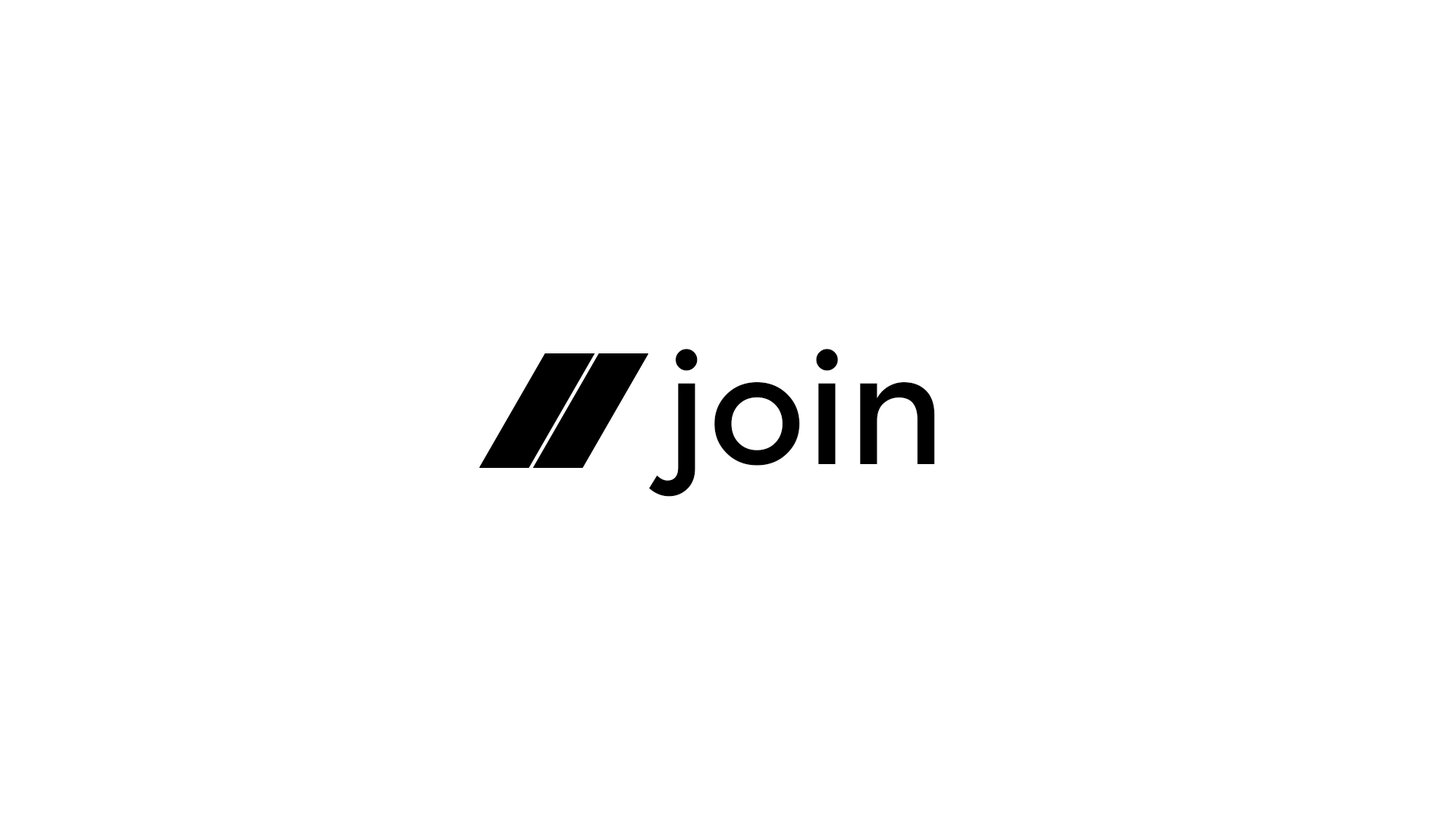
<style>
.page{position:relative;width:1456px;height:819px;background:#ffffff}
.page>*{position:absolute;margin:0}
.t1{font:151.7px "Montserrat-Regular";color:#000000}
</style>
<div class="page">
<p class="t1" style="left:649px;top:349px;width:286px;height:148px">join</p>
</div>
